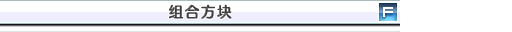
<style>
.page{position:relative;width:512px;height:32px;background:#ffffff}
.page>*{position:absolute;margin:0}
.t1{font:14.7px "FZFW-QingYinTiS-B--GB1-0";letter-spacing:0.1em;color:#3d3e3d}
</style>
<div class="page">
<p class="t1" style="left:168px;top:4px;width:64px;height:15px">组合方块</p>
</div>
